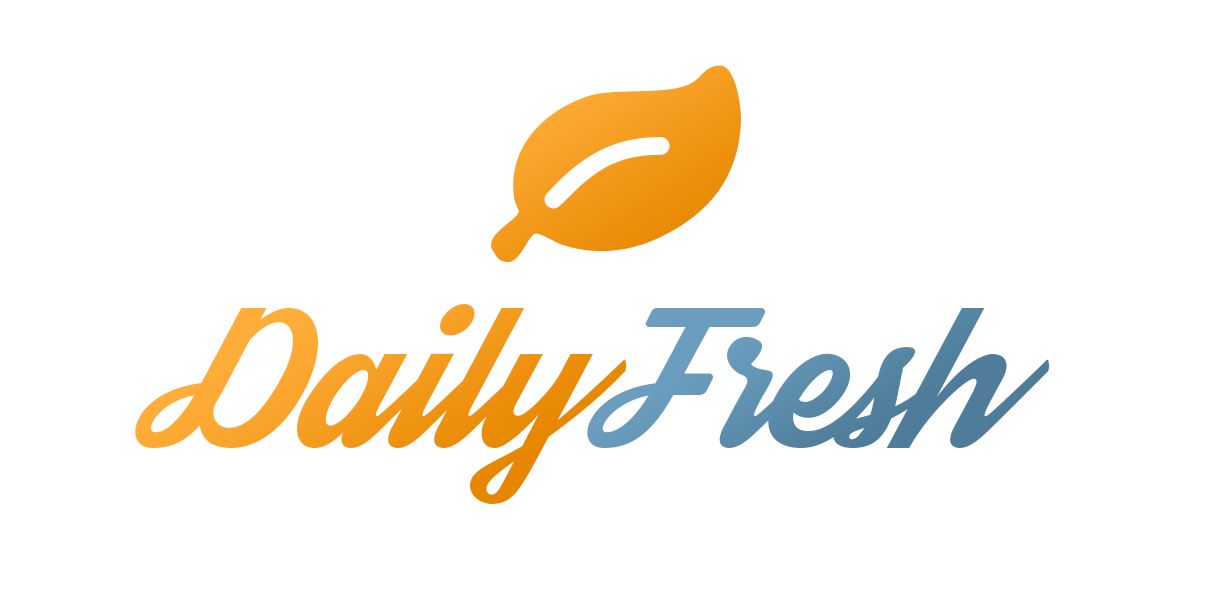
<style>
.page{position:relative;width:1232px;height:616px;background:#ffffff}
.page>*{position:absolute;margin:0}
.t1{font:142px "Streetwear";letter-spacing:-0.025em}
.t2{font:142px "Streetwear";letter-spacing:-0.025em;color:#5989a8}
</style>
<div class="page">
<p class="t1" style="left:135px;top:304px;width:492px;height:200px">Daily</p>
<p class="t2" style="left:587px;top:308px;width:462px;height:141px">Fresh</p>
</div>
